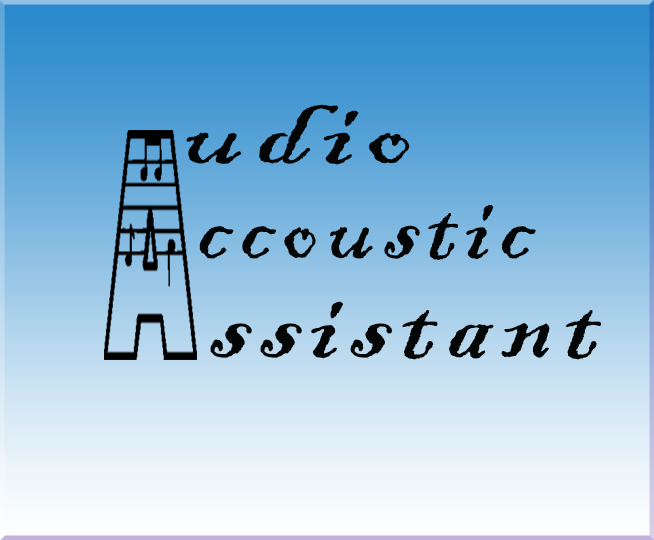
<style>
.page{position:relative;width:654px;height:540px}
.page>*{position:absolute;margin:0}
.t1{font:109.5px "BlackadderITC-Regular";letter-spacing:0.08em;color:#040505;scale:1.26 1}
.t2{font:110.4px "BlackadderITC-Regular";letter-spacing:0.08em;color:#040505}
.t3{font:115.3px "BlackadderITC-Regular";letter-spacing:0.08em;color:#040505;scale:1.1 1}
</style>
<div class="page">
<p class="t1" style="left:186px;top:104px;width:224px;height:61px">udio</p>
<p class="t2" style="left:199px;top:205px;width:337px;height:56px">ccoustic</p>
<p class="t3" style="left:210px;top:301px;width:391px;height:59px">ssistant</p>
</div>
